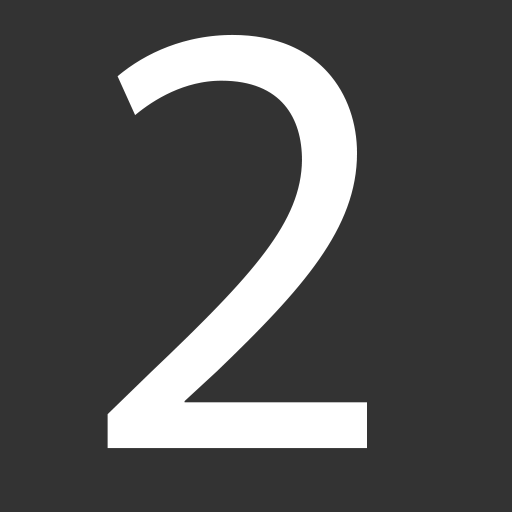
<style>
.page{position:relative;width:512px;height:512px;background:#333333}
.page>*{position:absolute;margin:0}
.t1{font:625px "MyriadPro-Regular";color:#ffffff}
</style>
<div class="page">
<p class="t1" style="left:107px;top:34px;width:260px;height:415px">2</p>
</div>
